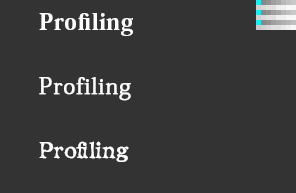
<style>
.page{position:relative;width:296px;height:193px;background:#333333}
.page>*{position:absolute;margin:0}
.t1{font:22px/64px "KozMinPro-Heavy";letter-spacing:0.022em;color:#ffffff}
.t2{font:22px/64px "AdobeFangsongStd-Regular";letter-spacing:0.028em;color:#ffffff;font-weight:bold}
.t3{font:22px/64px "ComicMysteryStd-DB";letter-spacing:-0.006em;color:#ffffff}
</style>
<div class="page">
<p class="t1" style="left:39px;top:13px;width:94px;height:149px">Profiling<br><span class="t2">Profiling<br></span><span class="t3">Profiling</span></p>
</div>
